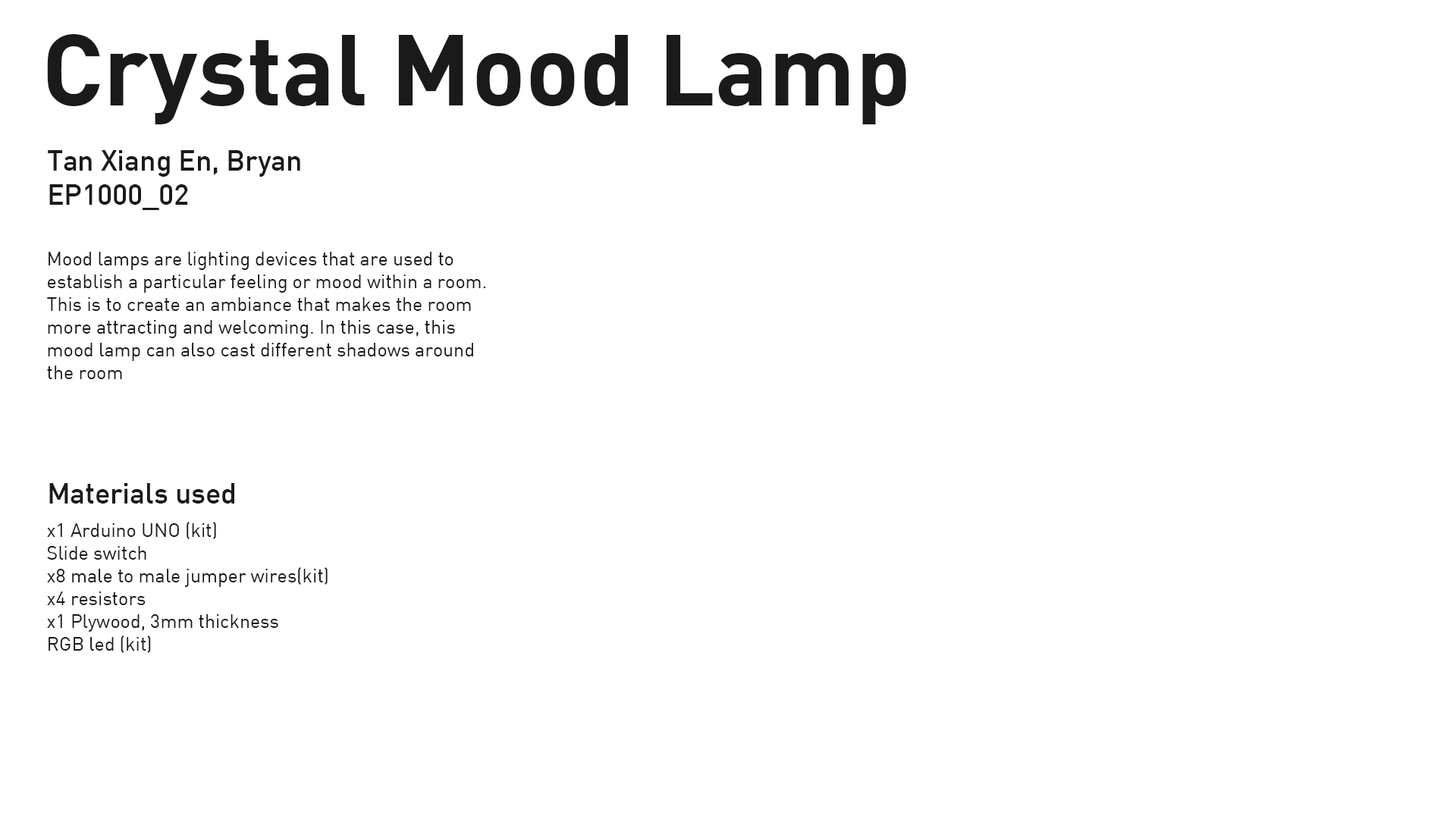
<style>
.page{position:relative;width:1456px;height:819px;background:#ffffff}
.page>*{position:absolute;margin:0}
.t1{font:99.4px "DIN-Bold";color:#1a1a1a}
.t2{font:28.4px "DIN-Medium";color:#1a1a1a}
.t3{font:19px "DIN-Regular";color:#1a1a1a}
</style>
<div class="page">
<p class="t1" style="left:47px;top:34px;width:859px;height:90px">Crystal Mood Lamp</p>
<p class="t2" style="left:48px;top:150px;width:252px;height:60px">Tan Xiang En, Bryan<br>EP1000_02</p>
<p class="t3" style="left:47px;top:252px;width:439px;height:127px">Mood lamps are lighting devices that are used to establish a particular feeling or mood within a room. This is to create an ambiance that makes the room more attracting and welcoming. In this case, this mood lamp can also cast different shadows around the room</p>
<p class="t2" style="left:49px;top:483px;width:185px;height:21px">Materials used</p>
<p class="t3" style="left:47px;top:522px;width:281px;height:131px">x1 Arduino UNO (kit)<br>Slide switch<br>x8 male to male jumper wires(kit)<br>x4 resistors<br>x1 Plywood, 3mm thickness<br>RGB led (kit)</p>
</div>
